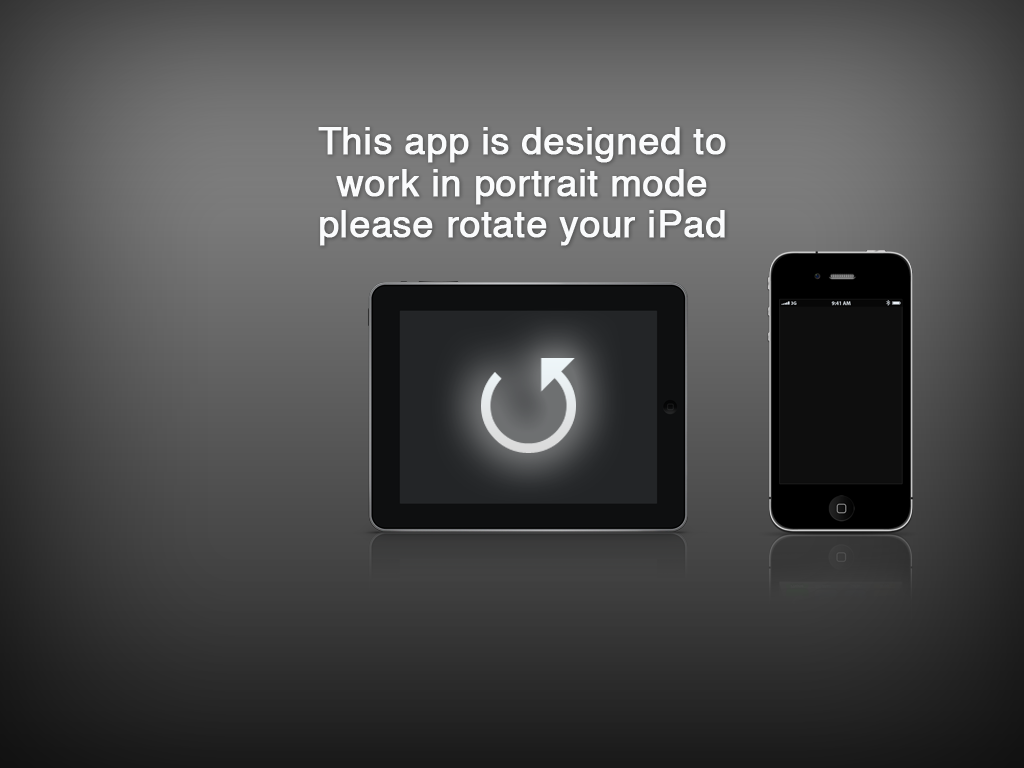
<style>
.page{position:relative;width:1024px;height:768px}
.page>*{position:absolute;margin:0}
.t1{font:37.5px/41.7px "Helvetica";color:#fafbfc;font-weight:bold}
</style>
<div class="page">
<p class="t1" style="left:318px;top:127px;width:408px;height:119px;text-align:center">This app is designed to<br>work in portrait mode<br>please rotate your iPad</p>
</div>
